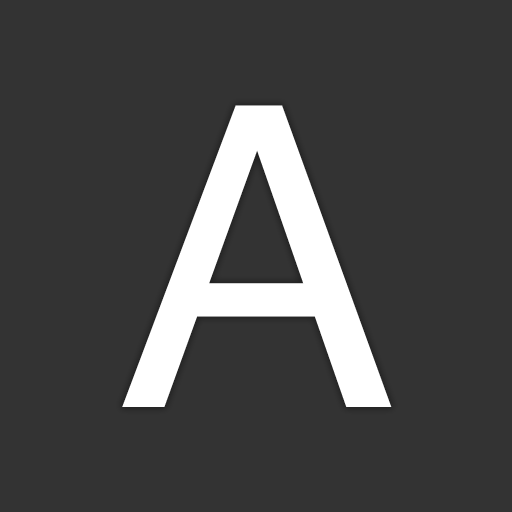
<style>
.page{position:relative;width:512px;height:512px;background:#333333}
.page>*{position:absolute;margin:0}
.t1{font:420px "Helvetica";color:#ffffff}
</style>
<div class="page">
<p class="t1" style="left:122px;top:105px;width:270px;height:302px">A</p>
</div>
